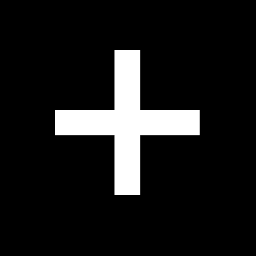
<style>
.page{position:relative;width:256px;height:256px;background:#000000}
.page>*{position:absolute;margin:0}
.t1{font:306px "ArialMT";color:#ffffff}
</style>
<div class="page">
<p class="t1" style="left:55px;top:50px;width:145px;height:145px">+</p>
</div>
